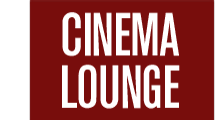
<style>
.page{position:relative;width:216px;height:120px;background:#780d0c}
.page>*{position:absolute;margin:0}
.t1{font:60.4px/52.3px "A750SansCdMedium";color:#ffffff}
</style>
<div class="page">
<p class="t1" style="left:62px;top:12px;width:118px;height:97px;text-align:center">CINEMA<br>LOUNGE</p>
</div>
